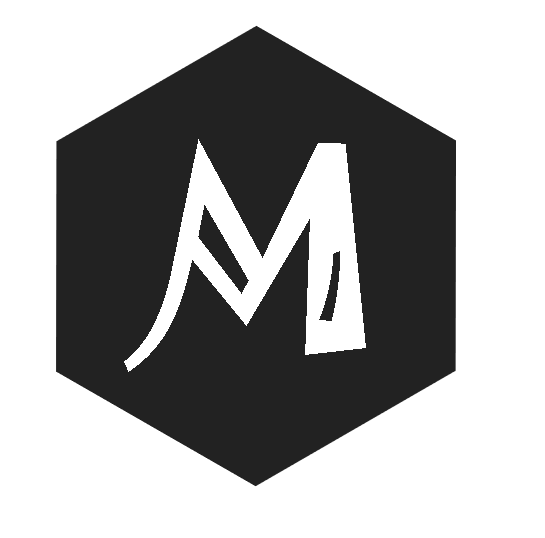
<style>
.page{position:relative;width:545px;height:538px;background:#ffffff}
.page>*{position:absolute;margin:0}
.t1{font:250px "Jokerman-Regular";color:#ffffff}
</style>
<div class="page">
<p class="t1" style="left:124px;top:139px;width:242px;height:233px">M</p>
</div>
